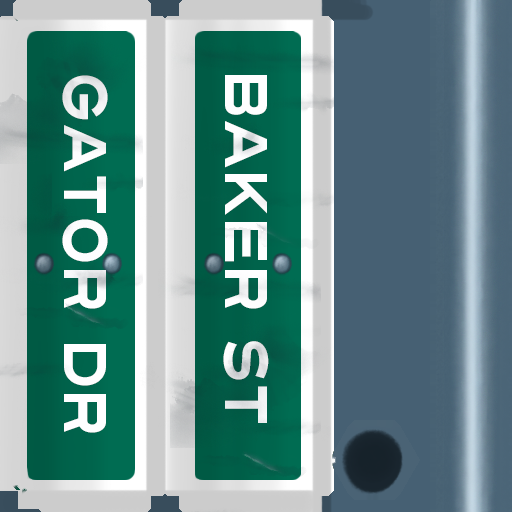
<style>
.page{position:relative;width:512px;height:512px}
.page>*{position:absolute;margin:0}
.t1{font:60px "Turnpike";color:#fefeff;scale:0.75 1}
</style>
<div class="page">
<p class="t1" style="left:62px;top:75px;width:46px;height:358px;rotate:90deg">Gator Dr</p>
<p class="t1" style="left:223px;top:75px;width:46px;height:348px;rotate:90deg">Baker St</p>
</div>
